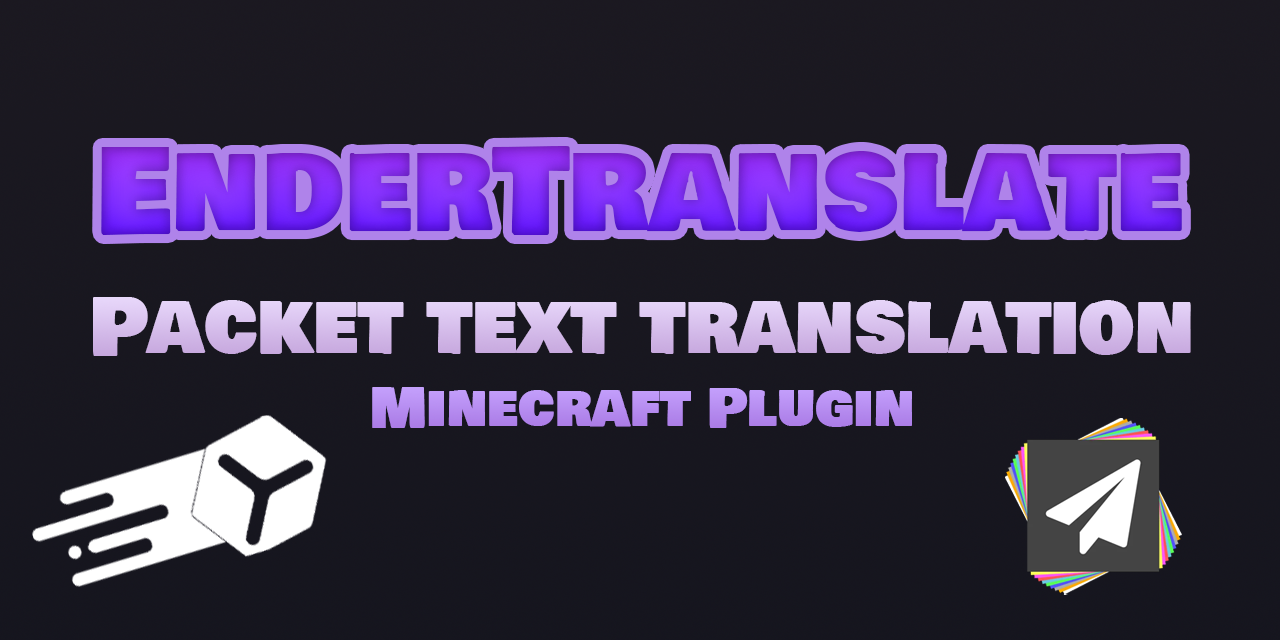
<style>
.page{position:relative;width:1280px;height:640px}
.page>*{position:absolute;margin:0}
.t1{font:118px "BowlbyOneSC-Regular"}
.t2{font:78.7px "BowlbyOneSC-Regular";color:#d7bfec}
.t3{font:53.9px "BowlbyOneSC-Regular";color:#b68ef1}
</style>
<div class="page">
<p class="t1" style="left:101px;top:146px;width:1081px;height:89px">EnderTranslate</p>
<p class="t2" style="left:93px;top:297px;width:1098px;height:59px">Packet text translation</p>
<p class="t3" style="left:372px;top:387px;width:540px;height:41px">Minecraft Plugin</p>
</div>
